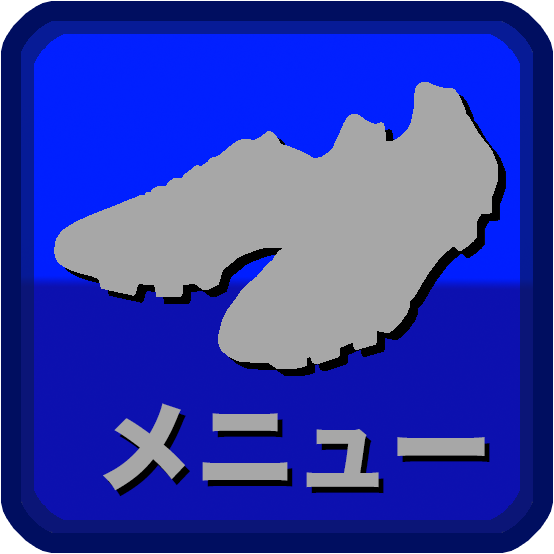
<style>
.page{position:relative;width:554px;height:554px;background:#a7a7a7}
.page>*{position:absolute;margin:0}
.t1{font:98px "HiraKakuStdN-W8";color:#a7a7a7}
.t2{font:98px "HiraKakuStdN-W8"}
</style>
<div class="page">
<p class="t1" style="left:103px;top:403px;width:382px;height:88px">メニュー</p>
<p class="t2" style="left:108px;top:409px;width:382px;height:88px">メニュー</p>
</div>
